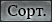
<style>
.page{position:relative;width:52px;height:22px}
.page>*{position:absolute;margin:0}
.t1{font:15px "CooperMediumCBT";letter-spacing:0.01em;color:#000000}
</style>
<div class="page">
<p class="t1" style="left:7px;top:5px;width:39px;height:14px">Сорт.</p>
</div>
